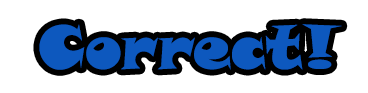
<style>
.page{position:relative;width:368px;height:93px;background:#ffffff}
.page>*{position:absolute;margin:0}
.t1{font:60px "SnapITC-Regular";color:#0d58be}
</style>
<div class="page">
<p class="t1" style="left:39px;top:24px;width:303px;height:46px">Correct!</p>
</div>
